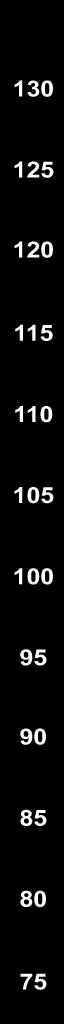
<style>
.page{position:relative;width:64px;height:1024px;background:#000000}
.page>*{position:absolute;margin:0}
.t1{font:22.2px "Arial-BoldMT";color:#ffffff;scale:1.12 1}
</style>
<div class="page">
<p class="t1" style="left:14px;top:80px;width:39px;height:17px">130</p>
<p class="t1" style="left:14px;top:161px;width:40px;height:17px">125</p>
<p class="t1" style="left:14px;top:241px;width:39px;height:17px">120</p>
<p class="t1" style="left:15px;top:324px;width:38px;height:17px">115</p>
<p class="t1" style="left:15px;top:406px;width:38px;height:17px">110</p>
<p class="t1" style="left:14px;top:487px;width:40px;height:17px">105</p>
<p class="t1" style="left:14px;top:568px;width:39px;height:17px">100</p>
<p class="t1" style="left:20px;top:649px;width:27px;height:17px">95</p>
<p class="t1" style="left:20px;top:728px;width:26px;height:17px">90</p>
<p class="t1" style="left:20px;top:809px;width:27px;height:17px">85</p>
<p class="t1" style="left:20px;top:890px;width:26px;height:17px">80</p>
<p class="t1" style="left:20px;top:973px;width:27px;height:17px">75</p>
</div>
